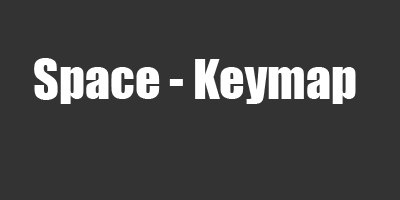
<style>
.page{position:relative;width:400px;height:200px;background:#333333}
.page>*{position:absolute;margin:0}
.t1{font:12px "Impact";color:#ffffff}
</style>
<div class="page">
<p class="t1" style="left:34px;top:58px;width:322px;height:46px">Space - Keymap</p>
</div>
